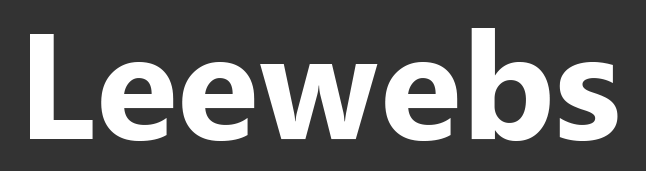
<style>
.page{position:relative;width:646px;height:171px;background:#333333}
.page>*{position:absolute;margin:0}
.t1{font:150px "Ebrima-Bold";letter-spacing:0.005em;color:#ffffff}
</style>
<div class="page">
<p class="t1" style="left:30px;top:28px;width:588px;height:113px">Leewebs</p>
</div>
